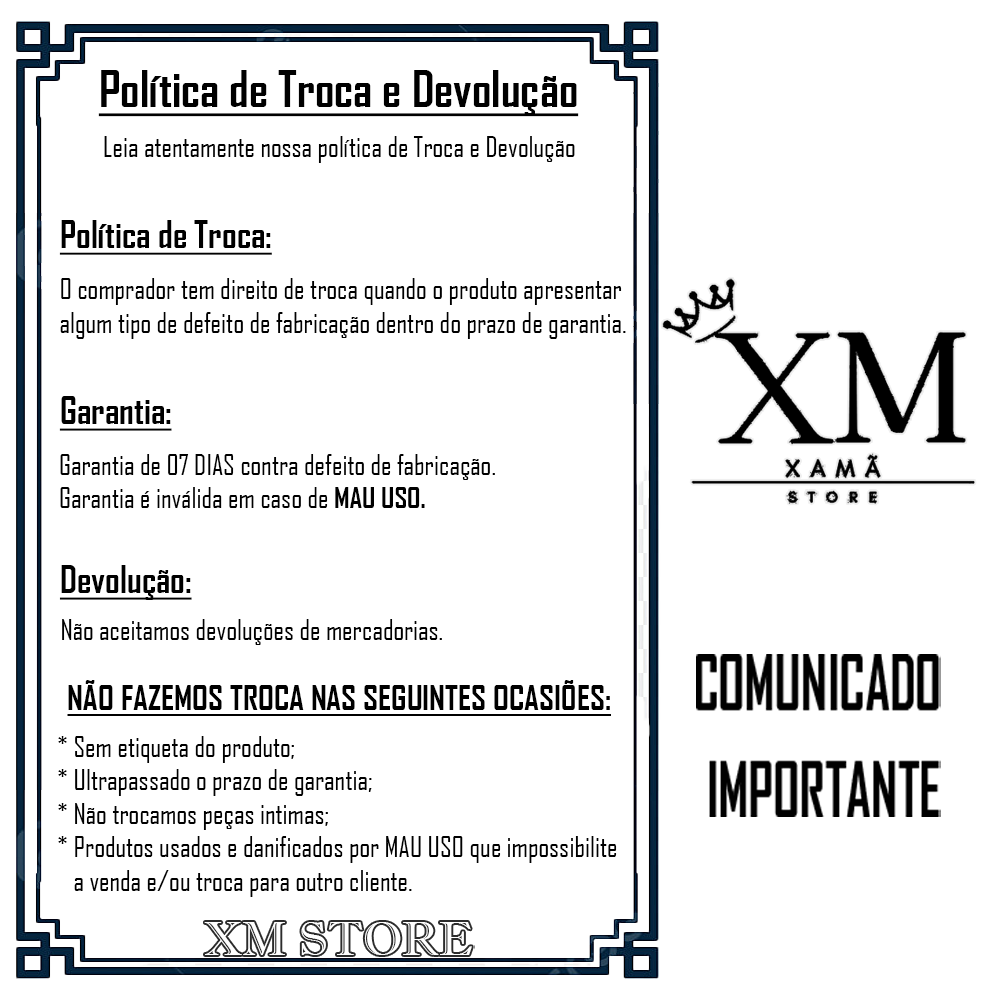
<style>
.page{position:relative;width:1000px;height:1000px;background:#ffffff}
.page>*{position:absolute;margin:0}
.t1{font:48px "AgencyFB-Bold";color:#000000;text-decoration:underline}
.t2{font:28px "AgencyFB-Reg";color:#000000}
.t3{font:36px "AgencyFB-Bold";color:#000000;text-decoration:underline}
.t4{font:28px "AgencyFB-Bold";color:#000000}
.t5{font:33px "AgencyFB-Bold";color:#000000;text-decoration:underline}
</style>
<div class="page">
<p class="t1" style="left:98px;top:70px;width:481px;height:47px">Política de Troca e Devolução</p>
<p class="t2" style="left:104px;top:136px;width:471px;height:27px">Leia atentamente nossa política de Troca e Devolução</p>
<p class="t3" style="left:59px;top:220px;width:213px;height:35px">Política de Troca:</p>
<p class="t2" style="left:60px;top:278px;width:566px;height:61px">O comprador tem direito de troca quando o produto apresentar <br>algum tipo de defeito de fabricação dentro do prazo de garantia.</p>
<p class="t3" style="left:59px;top:396px;width:113px;height:35px">Garantia:</p>
<p class="t2" style="left:60px;top:454px;width:435px;height:54px">Garantia de 07 DIAS contra defeito de fabricação.<br>Garantia é inválida em caso de <span class="t4">MAU USO.</span></p>
<p class="t3" style="left:59px;top:565px;width:133px;height:35px">Devolução:</p>
<p class="t2" style="left:62px;top:619px;width:380px;height:26px">Não aceitamos devoluções de mercadorias.</p>
<p class="t5" style="left:67px;top:680px;width:544px;height:36px">NÃO FAZEMOS TROCA NAS SEGUINTES OCASIÕES:</p>
<p class="t2" style="left:58px;top:736px;width:559px;height:161px">* Sem etiqueta do produto;<br>* Ultrapassado o prazo de garantia;<br>* Não trocamos peças intimas;<br>* Produtos usados e danificados por MAU USO que impossibilite<br>   a venda e/ou troca para outro cliente.</p>
</div>
